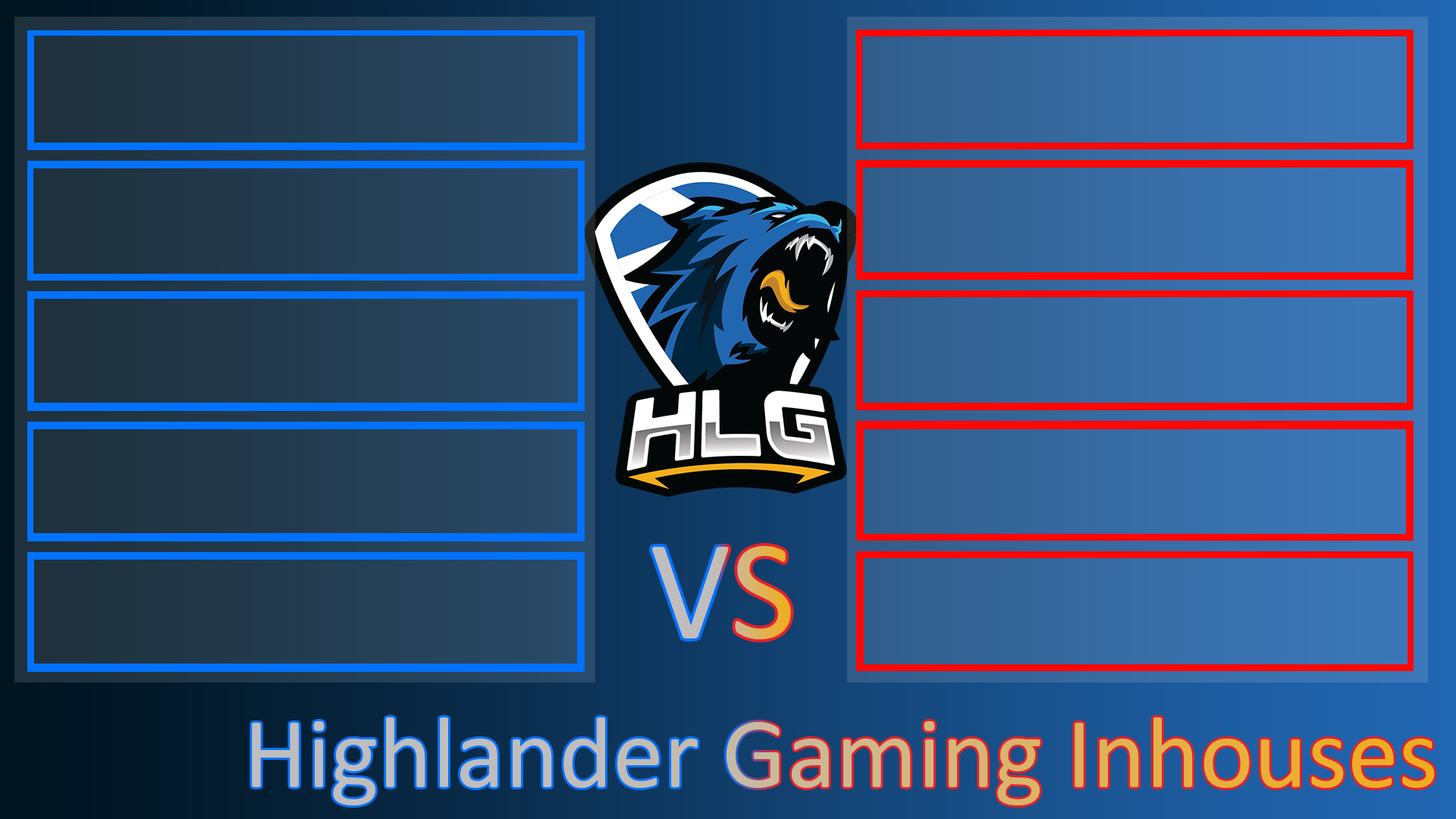
<style>
.page{position:relative;width:1456px;height:819px}
.page>*{position:absolute;margin:0}
.t1{font:142.6px "Calibri"}
.t2{font:102.4px "Calibri"}
</style>
<div class="page">
<p class="t1" style="left:652px;top:546px;width:139px;height:93px">VS</p>
<p class="t2" style="left:252px;top:717px;width:1183px;height:88px">Highlander Gaming Inhouses</p>
</div>
